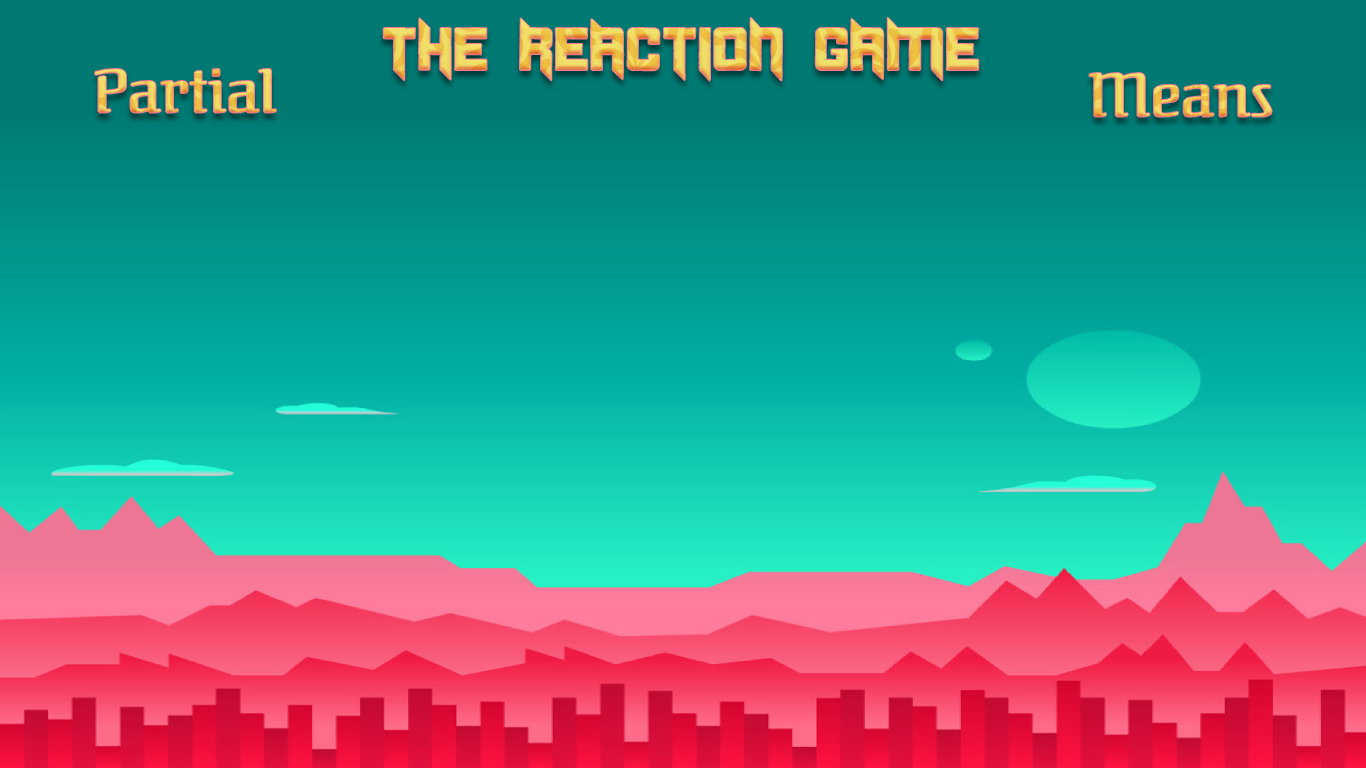
<style>
.page{position:relative;width:1366px;height:768px}
.page>*{position:absolute;margin:0}
.t1{font:60px "Duplexide"}
.t2{font:60px "Federant-Regular"}
</style>
<div class="page">
<p class="t1" style="left:383px;top:17px;width:596px;height:64px">THE REACTION GAME</p>
<p class="t2" style="left:95px;top:68px;width:181px;height:45px">Partial</p>
<p class="t2" style="left:1089px;top:73px;width:183px;height:44px">Means</p>
</div>
